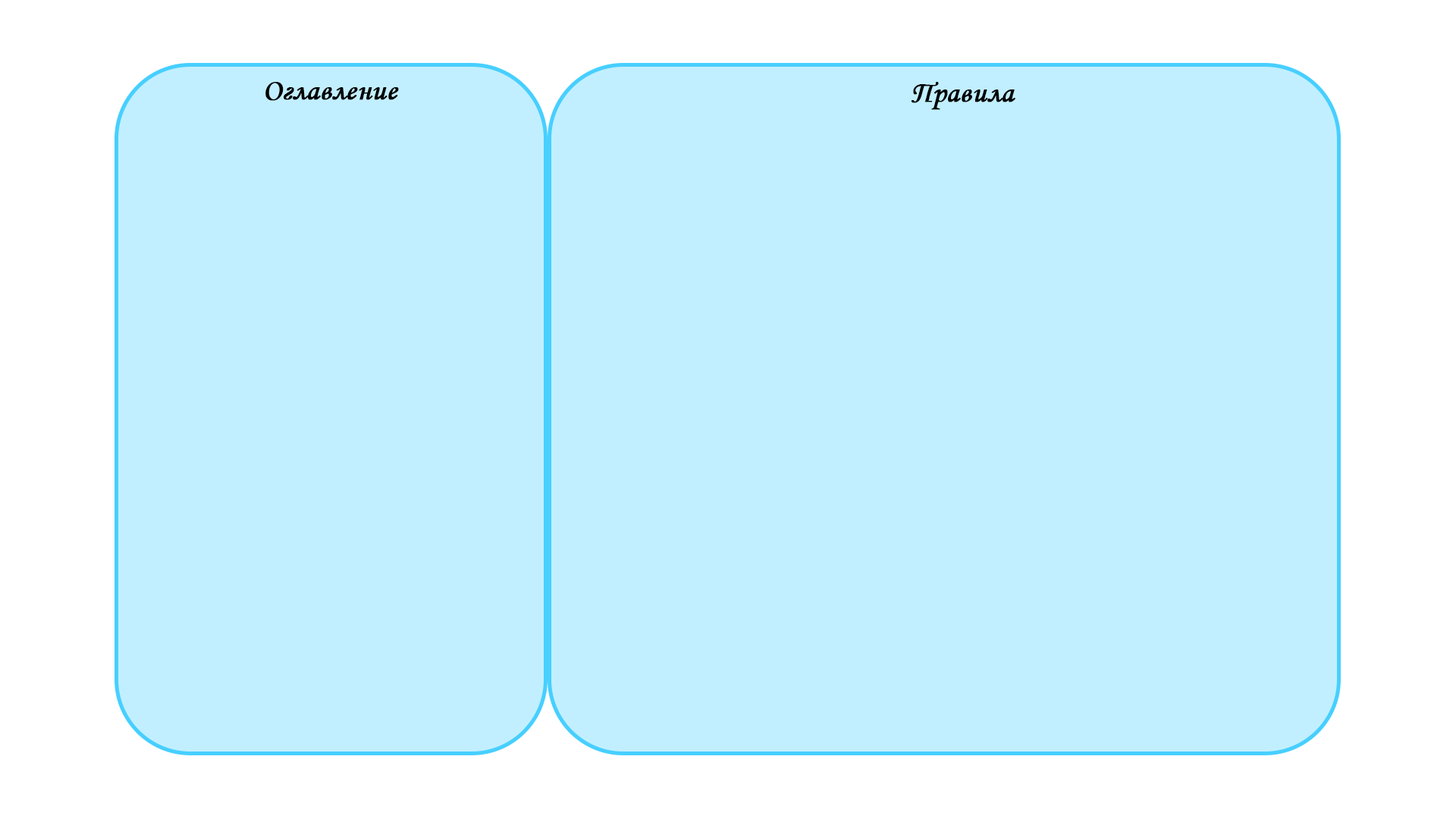
<style>
.page{position:relative;width:1456px;height:819px;background:#c2efff}
.page>*{position:absolute;margin:0}
.t1{font:30.3px "MonotypeCorsiva";color:#000000;font-weight:bold}
</style>
<div class="page">
<p class="t1" style="left:265px;top:82px;width:134px;height:19px">Оглавление</p>
<p class="t1" style="left:911px;top:82px;width:104px;height:28px">Правила</p>
</div>
